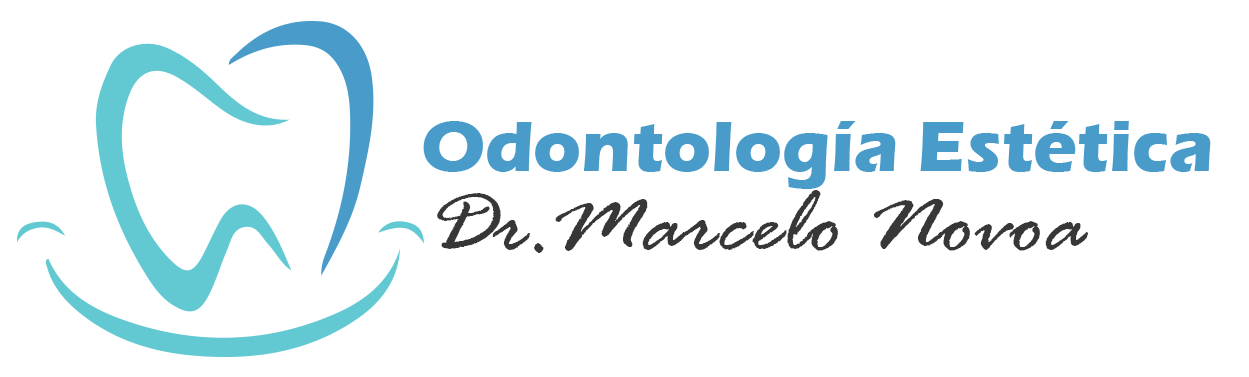
<style>
.page{position:relative;width:1249px;height:377px;background:#ffffff}
.page>*{position:absolute;margin:0}
.t1{font:74px "ErasITC-Bold";color:#499bca}
.t2{font:97px "RageItalic";color:#373737}
</style>
<div class="page">
<p class="t1" style="left:423px;top:121px;width:788px;height:68px">Odontología Estética</p>
<p class="t2" style="left:437px;top:190px;width:651px;height:63px">Dr.Marcelo Novoa</p>
</div>
